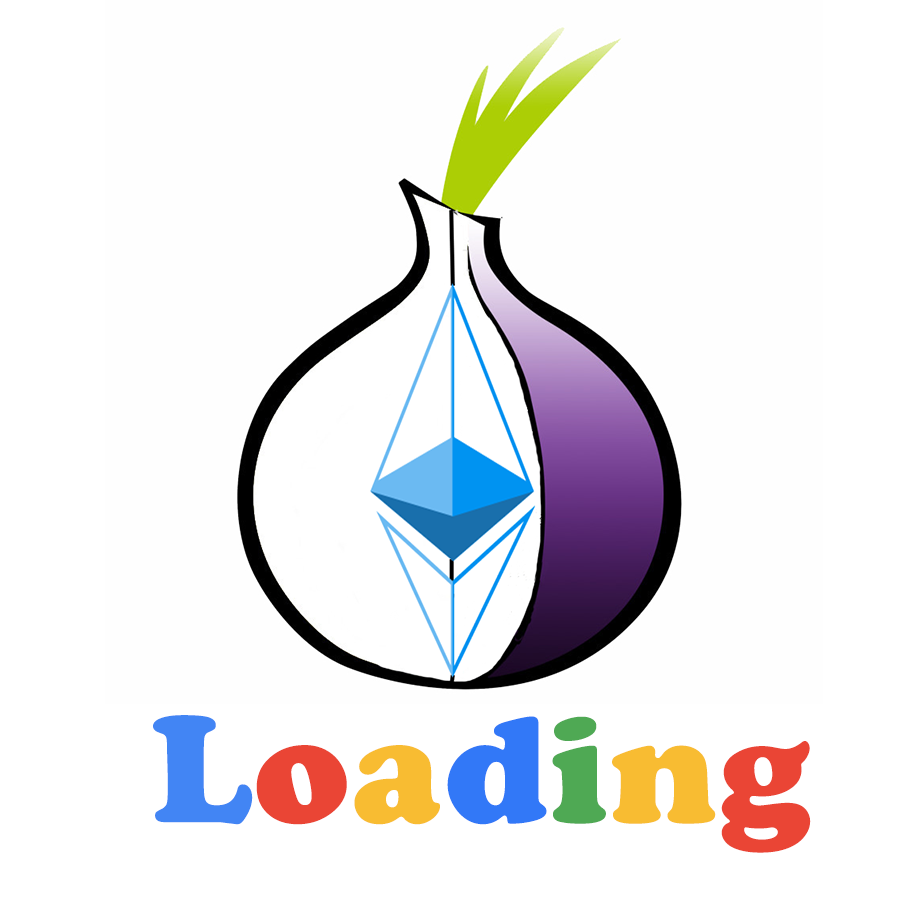
<style>
.page{position:relative;width:900px;height:900px;background:#fefefe}
.page>*{position:absolute;margin:0}
.t1{font:158px "CooperBlack";letter-spacing:0.02em;color:#4285f4}
.t2{font:158px "CooperBlack";letter-spacing:0.02em;color:#ea4535}
.t3{font:158px "CooperBlack";letter-spacing:0.02em;color:#f8bc32}
.t4{font:158px "CooperBlack";letter-spacing:0.02em;color:#3278f7}
.t5{font:158px "CooperBlack";letter-spacing:0.02em;color:#4fa954}
</style>
<div class="page">
<p class="t1" style="left:153px;top:715px;width:658px;height:138px">L<span class="t2">o</span><span class="t3">a</span><span class="t4">d</span><span class="t5">i</span><span class="t3">n</span><span class="t2">g</span></p>
</div>
